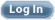
<style>
.page{position:relative;width:55px;height:20px}
.page>*{position:absolute;margin:0}
.t1{font:12.5px "MyriadPro-Bold";color:#ffffff}
</style>
<div class="page">
<p class="t1" style="left:9px;top:4px;width:34px;height:12px">Log In</p>
</div>
